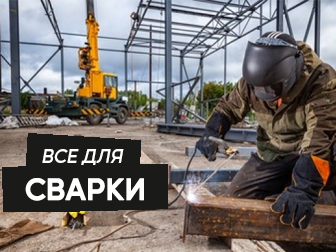
<style>
.page{position:relative;width:336px;height:252px}
.page>*{position:absolute;margin:0}
.t1{font:18.7px "MusticaPro-SemiBold";color:#ffffff;text-transform:uppercase;font-style:italic}
.t2{font:29.3px "MusticaPro-SemiBold";color:#ffffff;text-transform:uppercase;font-weight:bold}
</style>
<div class="page">
<p class="t1" style="left:42px;top:149px;width:82px;height:16px">Все для</p>
<p class="t2" style="left:25px;top:178px;width:119px;height:23px">СВАРКИ</p>
</div>
